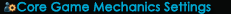
<style>
.page{position:relative;width:231px;height:14px;background:#070908}
.page>*{position:absolute;margin:0}
.t1{font:12px "CenturyGothic";color:#00a9d3;font-weight:bold}
</style>
<div class="page">
<p class="t1" style="left:17px;top:1px;width:194px;height:13px">Core Game Mechanics Settings</p>
</div>
